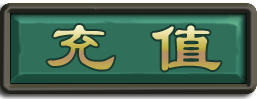
<style>
.page{position:relative;width:257px;height:99px;background:#30705b}
.page>*{position:absolute;margin:0}
.t1{font:72px "LiSu"}
</style>
<div class="page">
<p class="t1" style="left:47px;top:25px;width:174px;height:46px">充 值</p>
</div>
